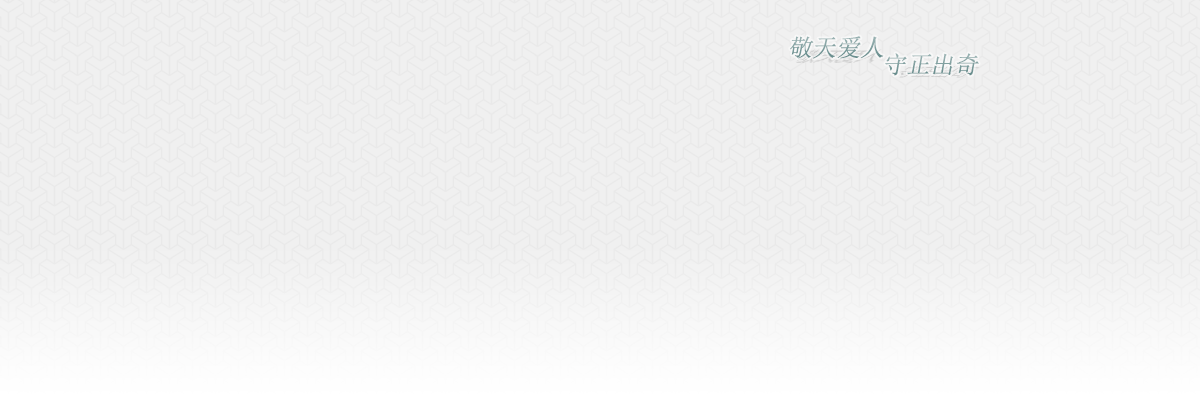
<style>
.page{position:relative;width:1200px;height:400px;background:#f0f0f0}
.page>*{position:absolute;margin:0}
.t1{font:24px "SimSun";color:#7d9d9d;font-style:italic}
.t2{font:24px "SimSun";color:#82a1a1;font-style:italic}
</style>
<div class="page">
<p class="t1" style="left:790px;top:36px;width:94px;height:23px">敬天爱人</p>
<p class="t2" style="left:885px;top:53px;width:94px;height:23px">守正出奇</p>
</div>
